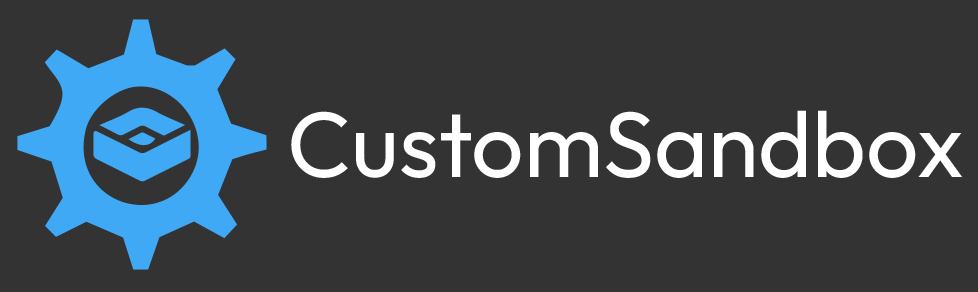
<style>
.page{position:relative;width:978px;height:292px;background:#333333}
.page>*{position:absolute;margin:0}
.t1{font:92.7px "Outfit-Regular";color:#ffffff}
</style>
<div class="page">
<p class="t1" style="left:291px;top:110px;width:672px;height:68px">CustomSandbox</p>
</div>
